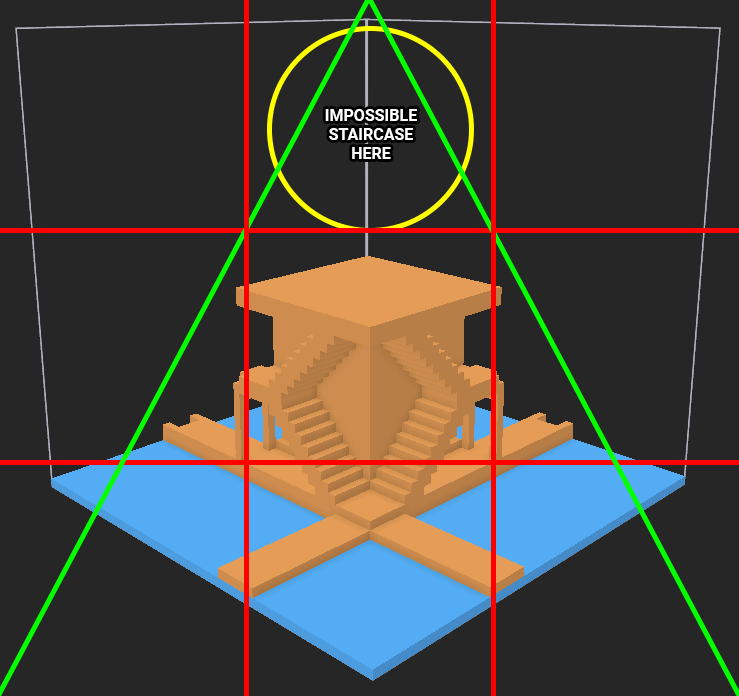
<style>
.page{position:relative;width:739px;height:696px;background:#262626}
.page>*{position:absolute;margin:0}
.t1{font:16px "Roboto-Bold";color:#ffffff}
</style>
<div class="page">
<p class="t1" style="left:325px;top:109px;width:92px;height:50px;text-align:center">IMPOSSIBLE STAIRCASE HERE</p>
</div>
